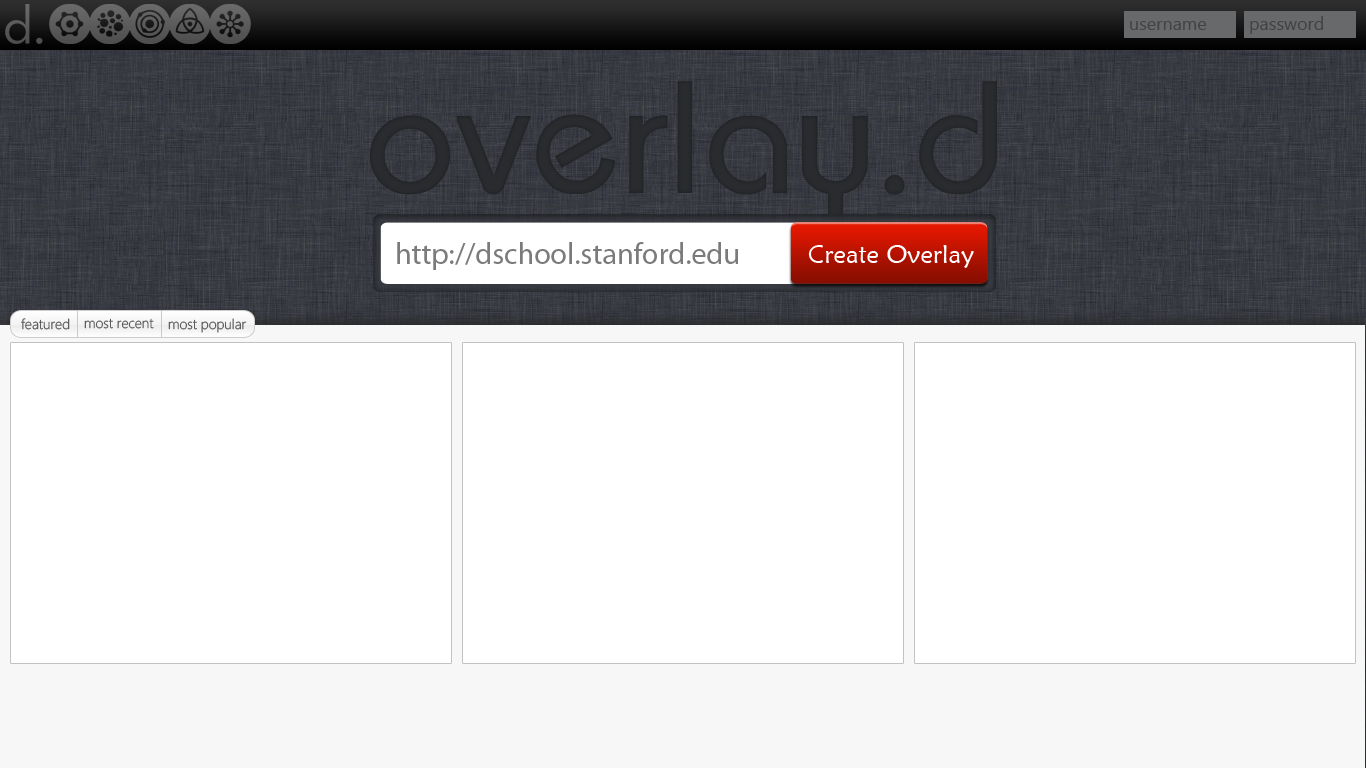
<style>
.page{position:relative;width:1366px;height:768px;background:#ffffff}
.page>*{position:absolute;margin:0}
.t1{font:18px "SegoeUI";color:#424244}
.t2{font:30px "MyriadPro-Regular";color:#7b7b7b}
.t3{font:25px "MaiandraGD-Regular";color:#ffffff}
.t4{font:14px "Segoe-Light";color:#5f5e5e}
</style>
<div class="page">
<p class="t1" style="left:1250px;top:16px;width:73px;height:18px">password</p>
<p class="t1" style="left:1130px;top:21px;width:76px;height:9px">username</p>
<p class="t2" style="left:397px;top:242px;width:341px;height:28px">http://dschool.stanford.edu</p>
<p class="t3" style="left:808px;top:245px;width:166px;height:23px">Create Overlay</p>
<p class="t4" style="left:21px;top:318px;width:49px;height:12px">featured</p>
<p class="t4" style="left:84px;top:318px;width:70px;height:11px">most recent</p>
<p class="t4" style="left:168px;top:318px;width:79px;height:15px">most popular</p>
</div>
